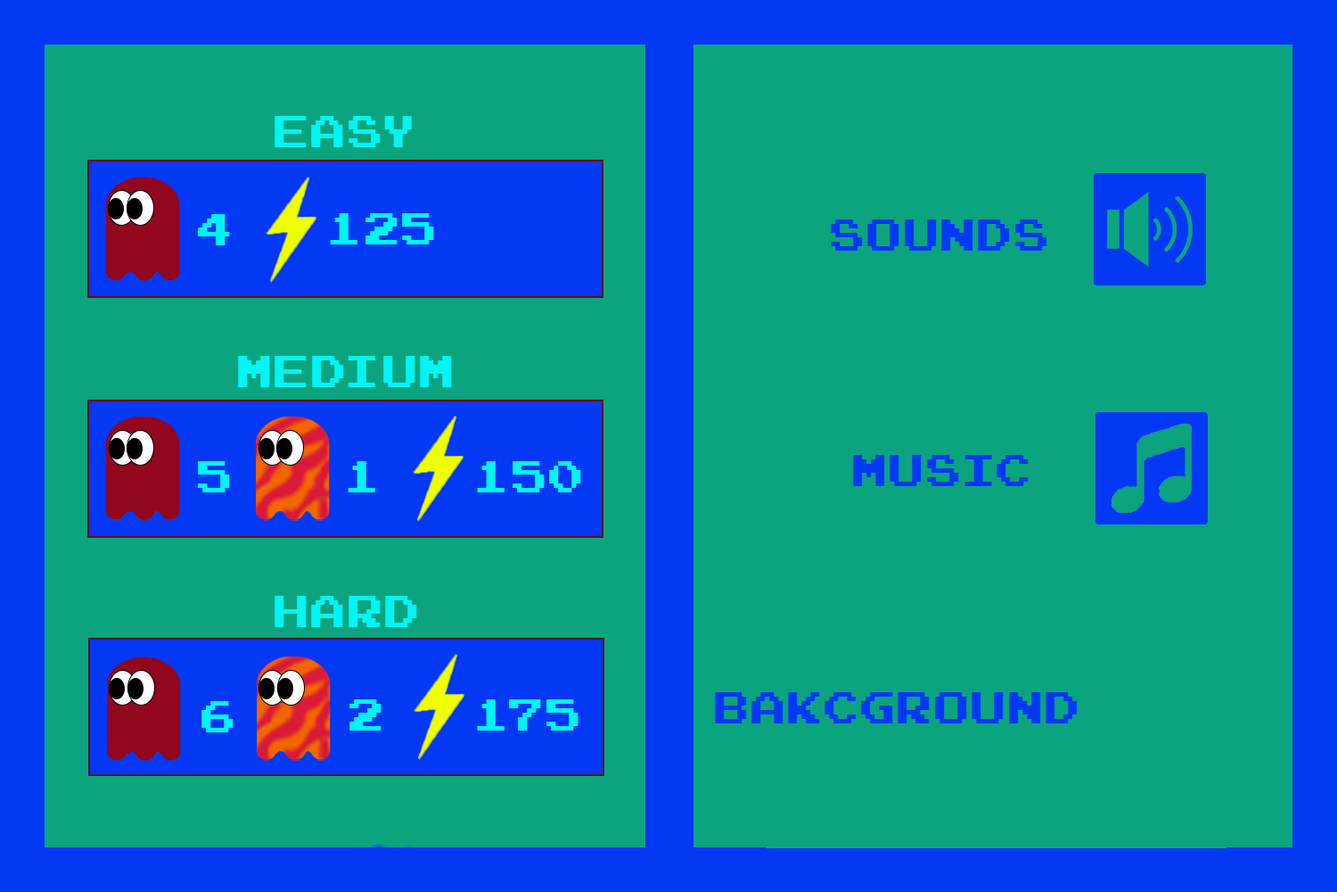
<style>
.page{position:relative;width:1337px;height:892px;background:#0ca47e}
.page>*{position:absolute;margin:0}
.t1{font:44.6px "JoystixMonospace-Regular";color:#03f4f4}
.t2{font:44.6px "JoystixMonospace-Regular";color:#0338f4}
.t3{font:44.5px "JoystixMonospace-Regular";color:#03f4f4}
</style>
<div class="page">
<p class="t1" style="left:275px;top:116px;width:137px;height:31px">easy</p>
<p class="t1" style="left:198px;top:214px;width:32px;height:31px">4</p>
<p class="t1" style="left:330px;top:213px;width:104px;height:31px">125</p>
<p class="t2" style="left:831px;top:219px;width:217px;height:32px">sounds</p>
<p class="t1" style="left:238px;top:356px;width:214px;height:31px">medium</p>
<p class="t1" style="left:198px;top:461px;width:32px;height:31px">5</p>
<p class="t1" style="left:348px;top:461px;width:27px;height:31px">1</p>
<p class="t1" style="left:477px;top:461px;width:104px;height:31px">150</p>
<p class="t2" style="left:853px;top:455px;width:176px;height:31px">music</p>
<p class="t3" style="left:275px;top:596px;width:142px;height:31px">hard</p>
<p class="t3" style="left:202px;top:701px;width:32px;height:31px">6</p>
<p class="t3" style="left:350px;top:699px;width:32px;height:31px">2</p>
<p class="t3" style="left:477px;top:699px;width:102px;height:31px">175</p>
<p class="t2" style="left:715px;top:692px;width:363px;height:31px">bakcground</p>
</div>
